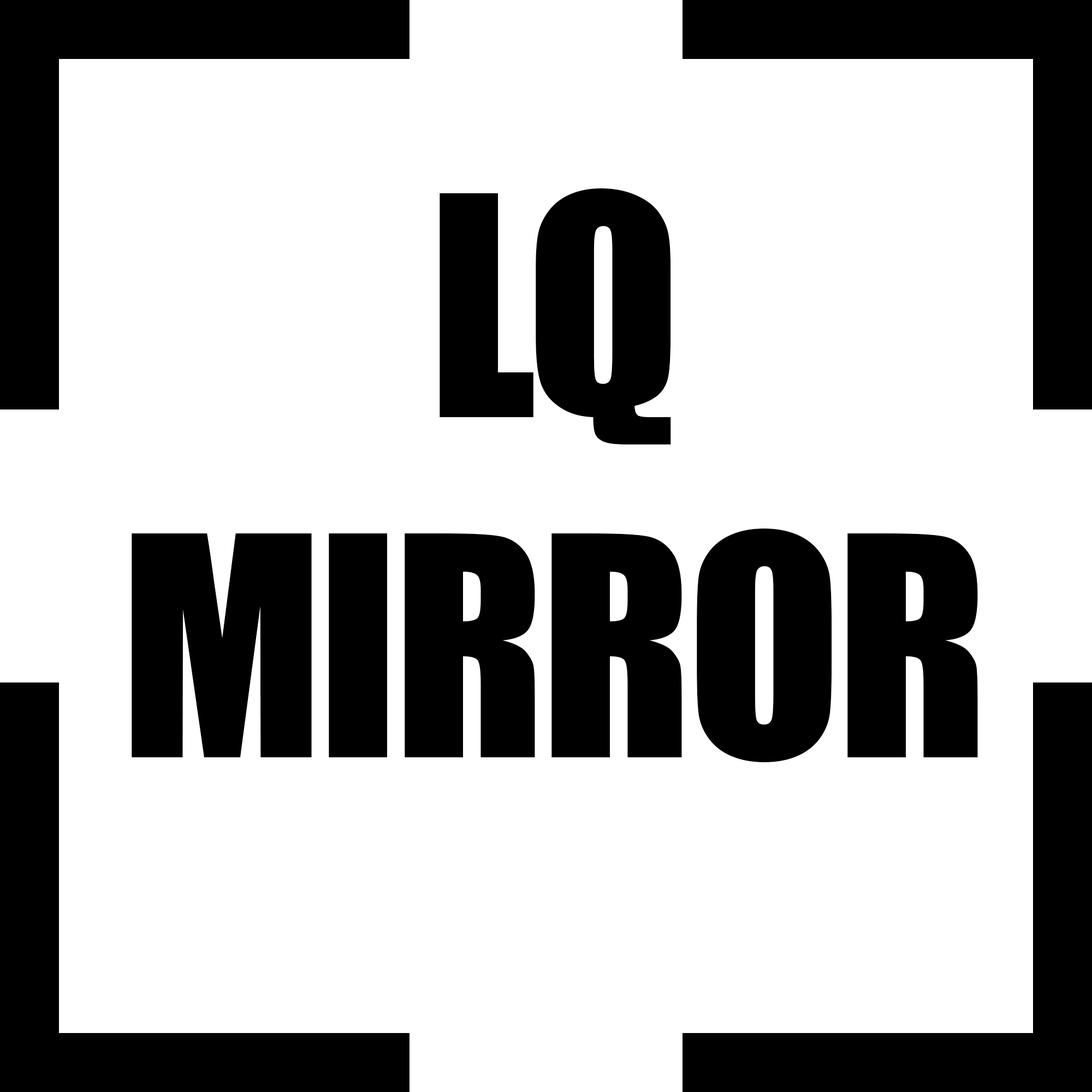
<style>
.page{position:relative;width:1092px;height:1092px;background:#ffffff}
.page>*{position:absolute;margin:0}
.t1{font:283.1px "Impact";letter-spacing:-0.02em;color:#000000}
</style>
<div class="page">
<p class="t1" style="left:132px;top:188px;width:846px;height:574px;text-align:center">LQ<br>MIRROR</p>
</div>
